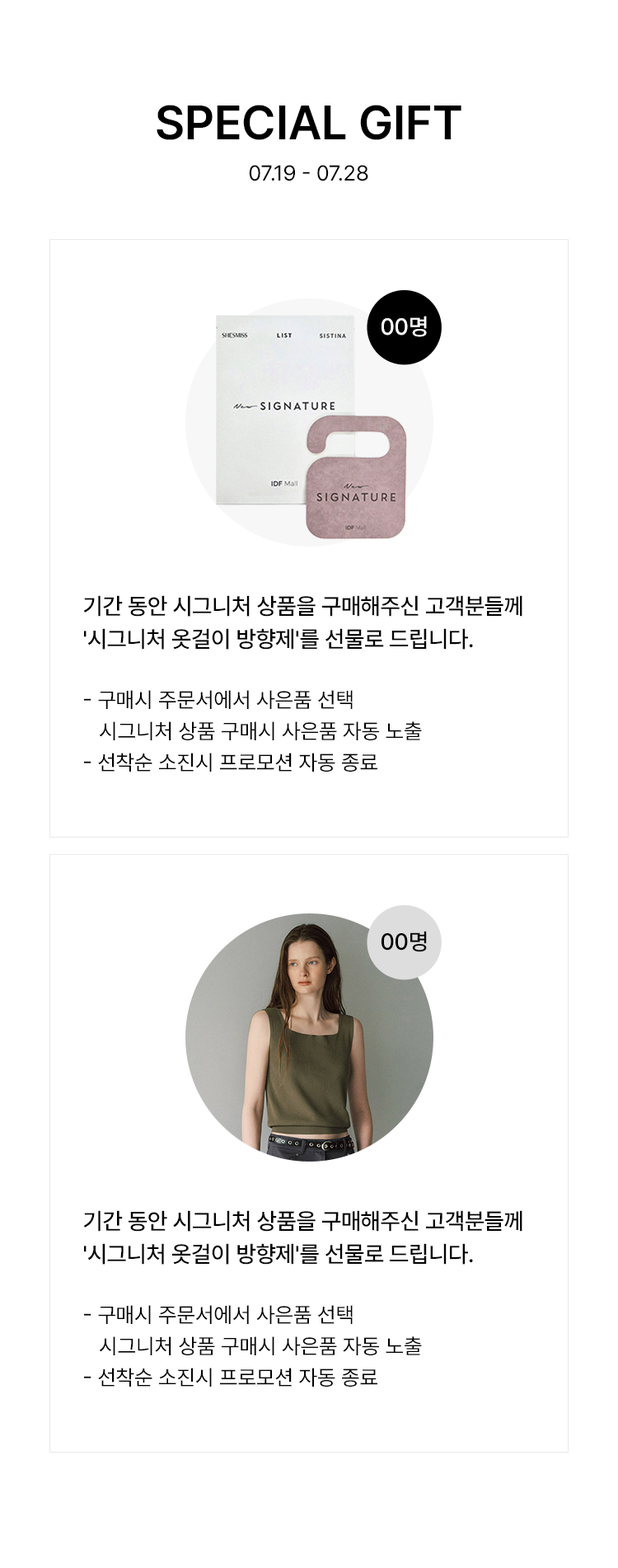
<style>
.page{position:relative;width:618px;height:1568px;background:#ffffff}
.page>*{position:absolute;margin:0}
.t1{font:47.8px "Pretendard-SemiBold";color:#000000;text-transform:uppercase}
.t2{font:21.4px "Pretendard-Regular";color:#000000;text-transform:uppercase}
.t3{font:23.1px "Pretendard-Medium";color:#ffffff;text-transform:uppercase}
.t4{font:23.1px/33px "Pretendard-Medium";letter-spacing:-0.01em;color:#000000;text-transform:uppercase}
.t5{font:21.4px/31.3px "Pretendard-Regular";color:#000000;text-transform:uppercase}
.t6{font:23.1px "Pretendard-Medium";color:#000000;text-transform:uppercase}
</style>
<div class="page">
<p class="t1" style="left:157px;top:105px;width:305px;height:35px">SPECIAL gift</p>
<p class="t2" style="left:249px;top:165px;width:120px;height:16px">07.19 - 07.28</p>
<p class="t3" style="left:381px;top:316px;width:46px;height:21px">00명</p>
<p class="t4" style="left:83px;top:595px;width:440px;height:55px">기간 동안 시그니처 상품을 구매해주신 고객분들께 <br>'시그니처 옷걸이 방향제'를 선물로 드립니다.</p>
<p class="t5" style="left:84px;top:690px;width:338px;height:82px">- 구매시 주문서에서 사은품 선택<br>   시그니처 상품 구매시 사은품 자동 노출<br>- 선착순 소진시 프로모션 자동 종료</p>
<p class="t6" style="left:381px;top:931px;width:46px;height:21px">00명</p>
<p class="t4" style="left:83px;top:1210px;width:440px;height:55px">기간 동안 시그니처 상품을 구매해주신 고객분들께 <br>'시그니처 옷걸이 방향제'를 선물로 드립니다.</p>
<p class="t5" style="left:84px;top:1305px;width:338px;height:82px">- 구매시 주문서에서 사은품 선택<br>   시그니처 상품 구매시 사은품 자동 노출<br>- 선착순 소진시 프로모션 자동 종료</p>
</div>
